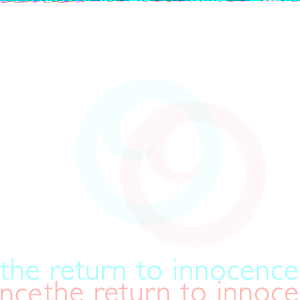
<style>
.page{position:relative;width:300px;height:300px;background:#ffffff}
.page>*{position:absolute;margin:0}
.t1{font:30px "GillSans-Light";letter-spacing:0.025em}
</style>
<div class="page">
<p class="t1" style="left:0px;top:257px;width:298px;height:22px">the return to innocence</p>
</div>
